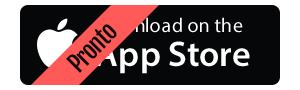
<style>
.page{position:relative;width:300px;height:90px;background:#050708}
.page>*{position:absolute;margin:0}
.t1{font:20px/34px "MyriadPro-Regular";color:#ffffff}
.t2{font:36px/34px "MyriadPro-Semibold";color:#ffffff}
.t3{font:24px "FjallaOne-Regular";letter-spacing:-0.05em;color:#0e0e0e}
</style>
<div class="page">
<p class="t1" style="left:95px;top:17px;width:155px;height:57px">Download on the<br><span class="t2">App Store</span></p>
<p class="t3" style="left:66px;top:24px;width:51px;height:49px;rotate:-45deg">Pronto</p>
</div>
